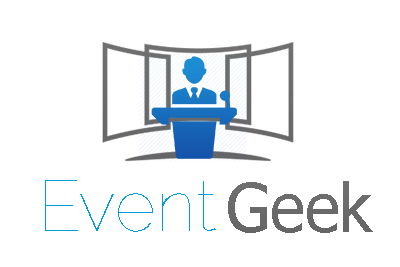
<style>
.page{position:relative;width:400px;height:267px;background:#ffffff}
.page>*{position:absolute;margin:0}
.t1{font:71.4px "Raleway-Thin";color:#009ddd}
.t2{font:66.7px "Tahoma";color:#6a6a6a}
</style>
<div class="page">
<p class="t1" style="left:45px;top:180px;width:171px;height:52px">Event</p>
<p class="t2" style="left:228px;top:181px;width:145px;height:52px">Geek</p>
</div>
